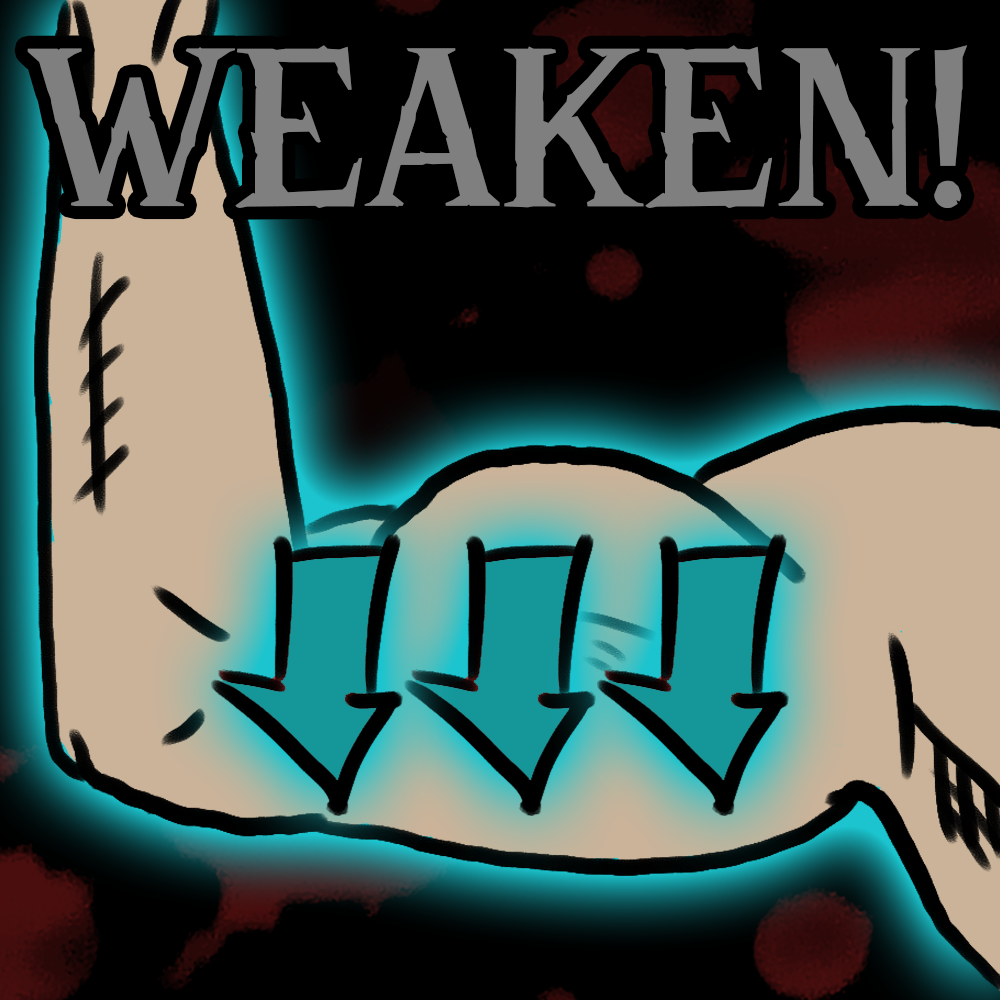
<style>
.page{position:relative;width:1000px;height:1000px;background:#000000}
.page>*{position:absolute;margin:0}
.t1{font:244.7px "KONSTANTINERegular";color:#7f7f7f}
</style>
<div class="page">
<p class="t1" style="left:27px;top:45px;width:941px;height:163px">weaken!</p>
</div>
